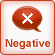
<style>
.page{position:relative;width:55px;height:55px}
.page>*{position:absolute;margin:0}
.t1{font:11px "Arial-BoldMT";color:#c0350f}
</style>
<div class="page">
<p class="t1" style="left:5px;top:39px;width:46px;height:11px">Negative</p>
</div>
